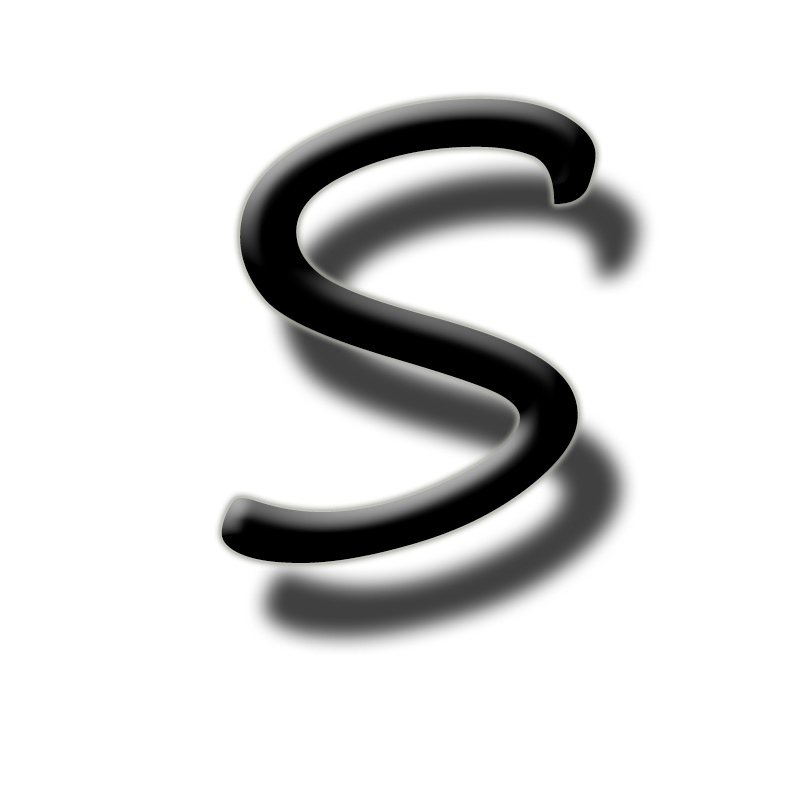
<style>
.page{position:relative;width:800px;height:800px;background:#ffffff}
.page>*{position:absolute;margin:0}
.t1{font:610.9px "SegoePrint";color:#010101;text-transform:uppercase;scale:1.08 1}
</style>
<div class="page">
<p class="t1" style="left:221px;top:98px;width:375px;height:465px">S</p>
</div>
